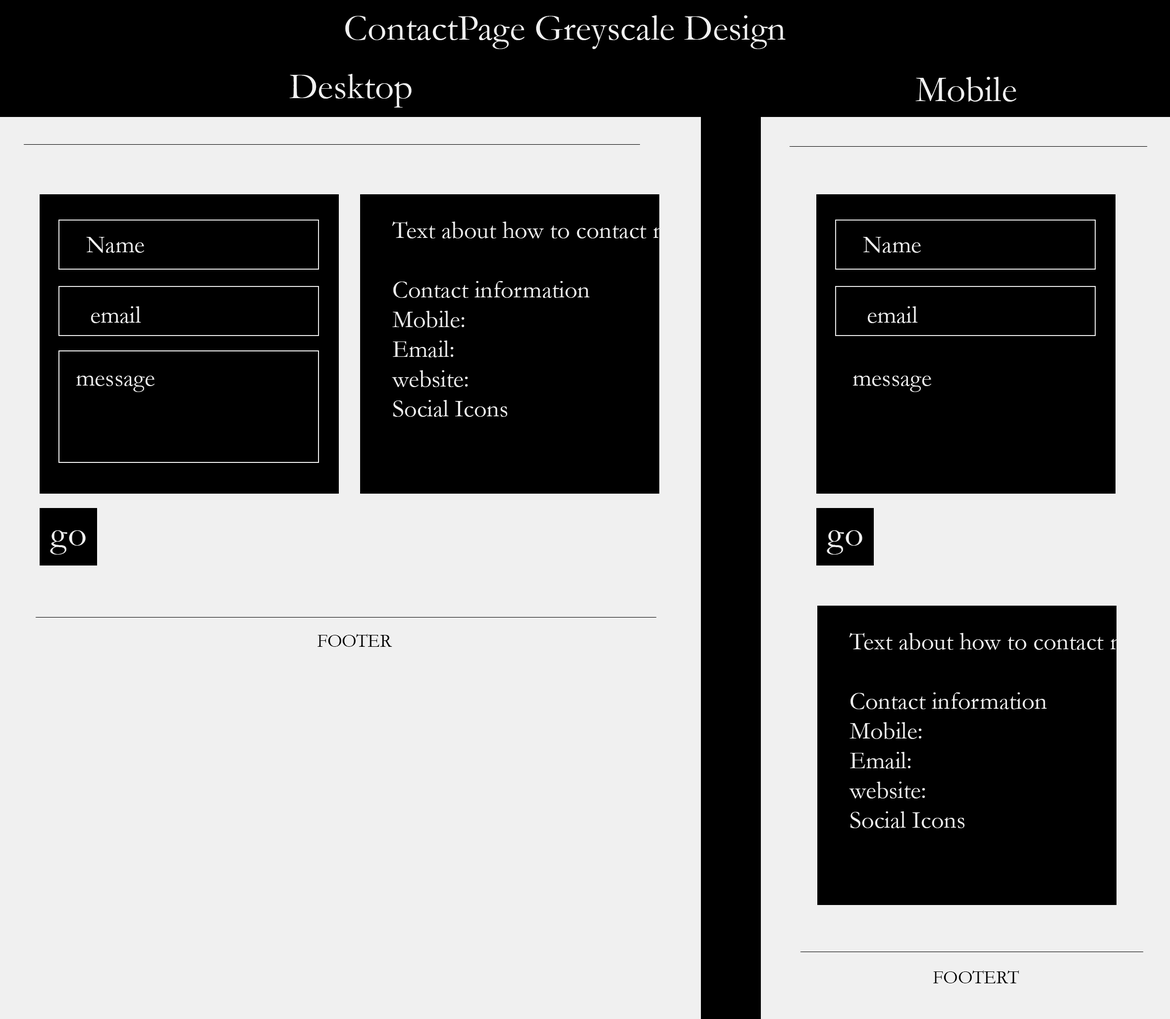
<style>
.page{position:relative;width:1170px;height:1019px;background:#f0f0f0}
.page>*{position:absolute;margin:0}
.t1{font:37.2px "Garamond";color:#f0f0f0}
.t2{font:24.8px "Garamond";color:#f0f0f0}
.t3{font:18.6px "Garamond";color:#000000}
</style>
<div class="page">
<p class="t1" style="left:345px;top:15px;width:441px;height:34px">ContactPage Greyscale Design</p>
<p class="t1" style="left:289px;top:74px;width:123px;height:34px">Desktop</p>
<p class="t1" style="left:916px;top:77px;width:101px;height:25px">Mobile</p>
<p class="t2" style="left:392px;top:221px;width:295px;height:196px">Text about how to contact me,<br><br>Contact information<br>Mobile:<br>Email:<br>website:<br>Social Icons</p>
<p class="t2" style="left:86px;top:237px;width:58px;height:16px">Name</p>
<p class="t2" style="left:863px;top:237px;width:58px;height:16px">Name</p>
<p class="t2" style="left:91px;top:306px;width:50px;height:17px">email</p>
<p class="t2" style="left:868px;top:306px;width:50px;height:17px">email</p>
<p class="t2" style="left:76px;top:375px;width:79px;height:17px">message</p>
<p class="t2" style="left:853px;top:375px;width:79px;height:17px">message</p>
<p class="t1" style="left:50px;top:530px;width:36px;height:24px">go</p>
<p class="t1" style="left:827px;top:530px;width:36px;height:24px">go</p>
<p class="t3" style="left:318px;top:634px;width:74px;height:13px">FOOTER</p>
<p class="t2" style="left:849px;top:633px;width:295px;height:195px">Text about how to contact me,<br><br>Contact information<br>Mobile:<br>Email:<br>website:<br>Social Icons</p>
<p class="t3" style="left:934px;top:970px;width:85px;height:13px">FOOTERT</p>
</div>
